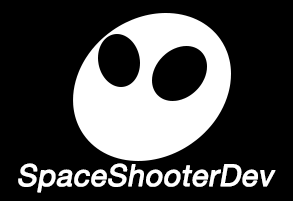
<style>
.page{position:relative;width:293px;height:201px;background:#000000}
.page>*{position:absolute;margin:0}
.t1{font:30px "HelveticaNeue";color:#ffffff;font-weight:bold;font-style:italic}
</style>
<div class="page">
<p class="t1" style="left:18px;top:163px;width:258px;height:30px">SpaceShooterDev</p>
</div>
